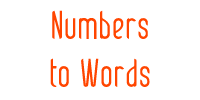
<style>
.page{position:relative;width:200px;height:100px;background:#ffffff}
.page>*{position:absolute;margin:0}
.t1{font:40px "PatinioContexto";color:#ff4500}
</style>
<div class="page">
<p class="t1" style="left:50px;top:10px;width:100px;height:77px;text-align:center">Numbers<br>to Words</p>
</div>
